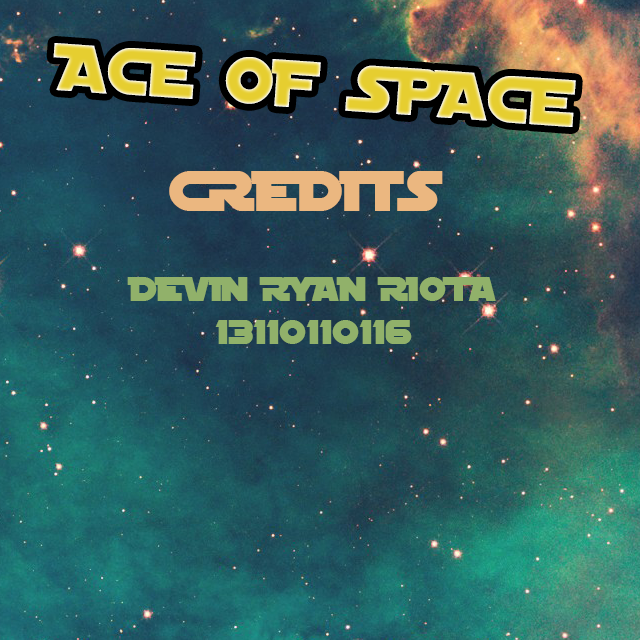
<style>
.page{position:relative;width:640px;height:640px}
.page>*{position:absolute;margin:0}
.t1{font:60px "SFDistantGalaxyAlternate";color:#ebb780}
.t2{font:36px "SFDistantGalaxyAlternate";color:#91b16a}
</style>
<div class="page">
<p class="t1" style="left:169px;top:171px;width:274px;height:40px">CREDITS</p>
<p class="t2" style="left:127px;top:277px;width:369px;height:67px;text-align:center">DEVIN RYAN RIOTA<br>13110110116</p>
</div>
